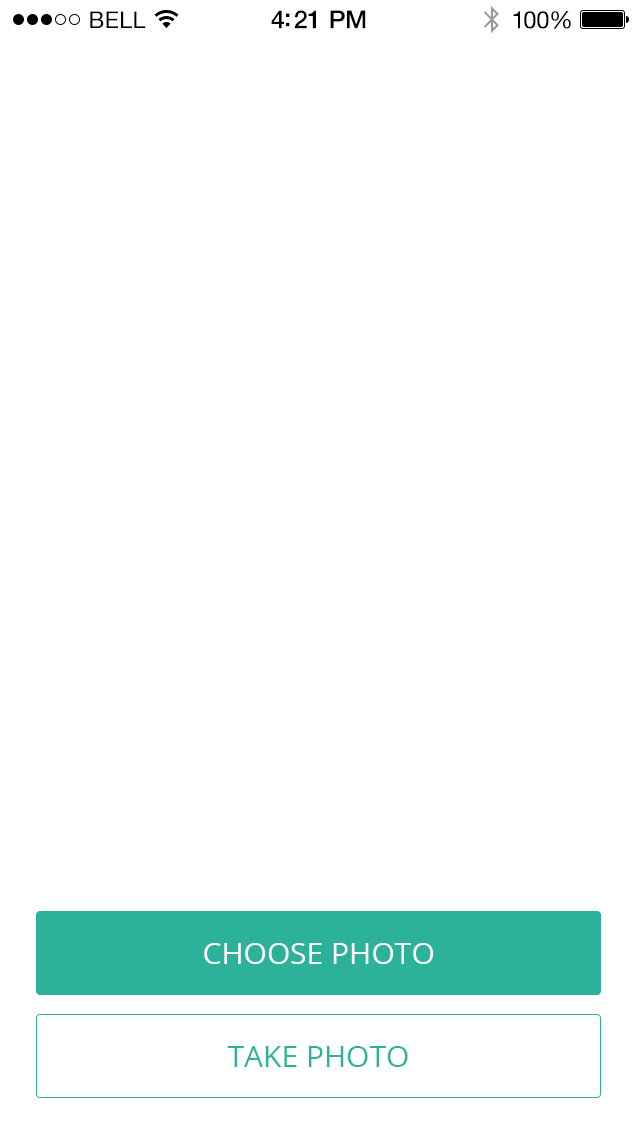
<style>
.page{position:relative;width:640px;height:1136px;background:#ffffff}
.page>*{position:absolute;margin:0}
.t1{font:23px "HelveticaNeue";letter-spacing:0.02em;color:#000000}
.t2{font:25px "HelveticaNeue-Medium";letter-spacing:-0.02em;color:#000000}
.t3{font:24px "HelveticaNeue";letter-spacing:-0.02em;color:#010101}
.t4{font:30px "OpenSans";color:#ffffff}
.t5{font:30px "OpenSans";color:#2cb299}
</style>
<div class="page">
<p class="t1" style="left:90px;top:11px;width:56px;height:17px">BELL</p>
<p class="t2" style="left:271px;top:10px;width:95px;height:19px">4:21 PM</p>
<p class="t3" style="left:513px;top:11px;width:58px;height:18px">100%</p>
<p class="t4" style="left:204px;top:943px;width:229px;height:21px">CHOOSE PHOTO</p>
<p class="t5" style="left:227px;top:1046px;width:181px;height:21px">TAKE PHOTO</p>
</div>
